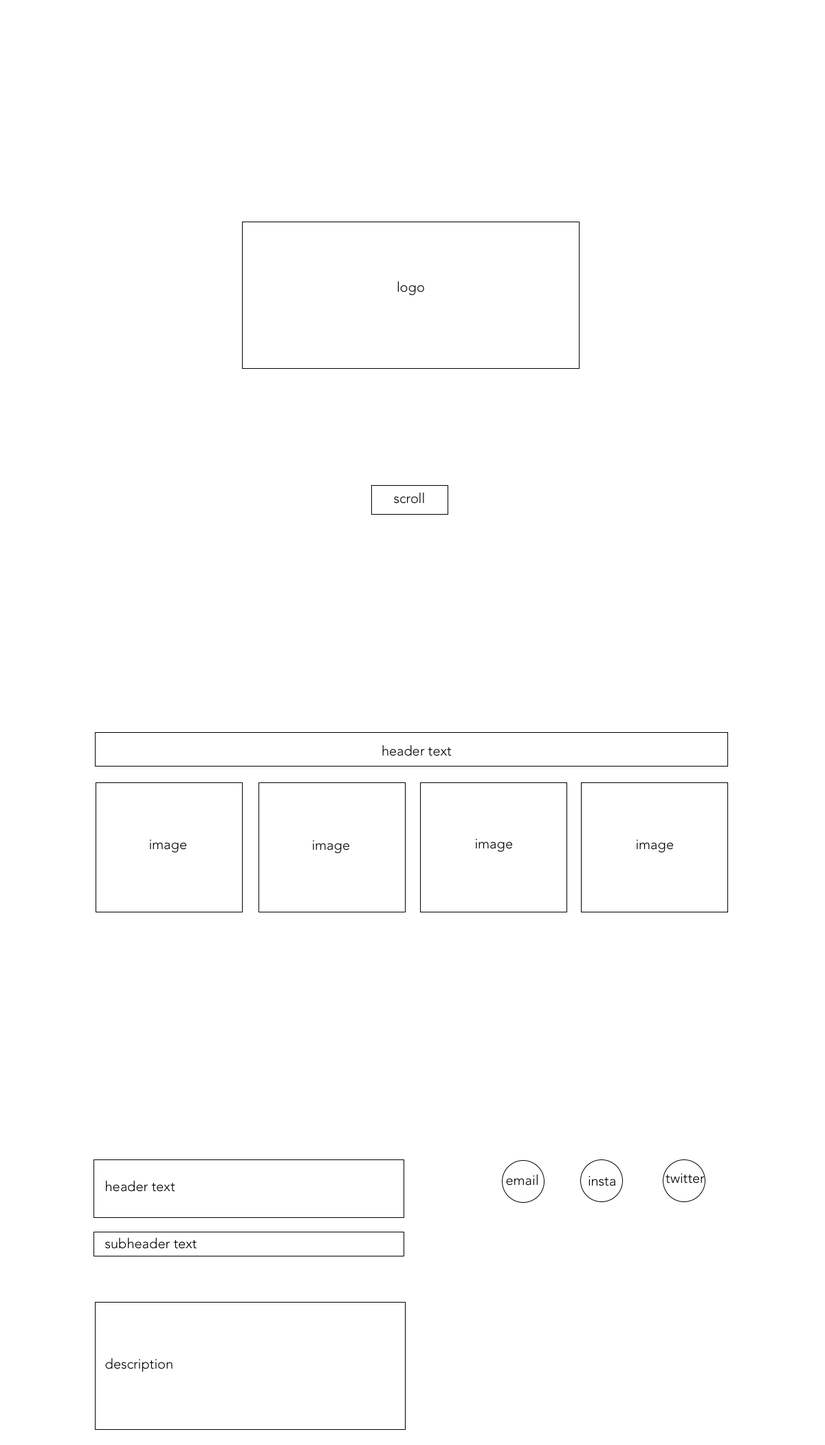
<style>
.page{position:relative;width:825px;height:1445px;background:#ffffff}
.page>*{position:absolute;margin:0}
.t1{font:13.8px "Avenir-Light";color:#000000}
</style>
<div class="page">
<p class="t1" style="left:398px;top:281px;width:26px;height:14px">logo</p>
<p class="t1" style="left:394px;top:492px;width:30px;height:12px">scroll</p>
<p class="t1" style="left:382px;top:744px;width:70px;height:12px">header text</p>
<p class="t1" style="left:150px;top:839px;width:36px;height:13px">image</p>
<p class="t1" style="left:313px;top:840px;width:36px;height:13px">image</p>
<p class="t1" style="left:476px;top:839px;width:36px;height:13px">image</p>
<p class="t1" style="left:637px;top:839px;width:36px;height:13px">image</p>
<p class="t1" style="left:106px;top:1180px;width:69px;height:11px">header text</p>
<p class="t1" style="left:506px;top:1174px;width:32px;height:11px">email</p>
<p class="t1" style="left:589px;top:1176px;width:27px;height:10px">insta</p>
<p class="t1" style="left:666px;top:1173px;width:39px;height:10px">twitter</p>
<p class="t1" style="left:105px;top:1237px;width:92px;height:12px">subheader text</p>
<p class="t1" style="left:105px;top:1357px;width:68px;height:15px">description</p>
</div>
